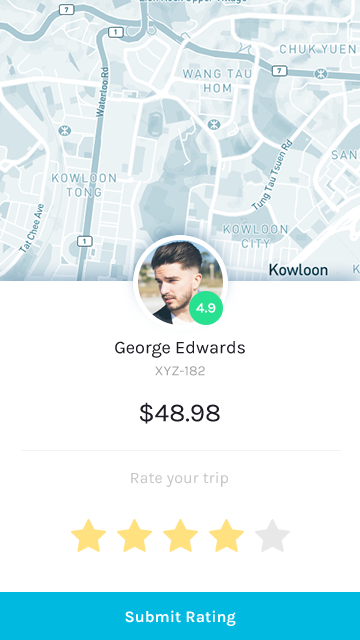
<style>
.page{position:relative;width:360px;height:640px;background:#ffffff}
.page>*{position:absolute;margin:0}
.t1{font:13.9px "Karla-Bold";color:#ffffff}
.t2{font:18px "Karla-Regular";color:#1b1b24}
.t3{font:14px "Karla-Regular";color:#a4a4a7;text-transform:uppercase}
.t4{font:26px "Karla-Regular";color:#1b1b24}
.t5{font:16px "Karla-Regular";color:#c6c6c8}
.t6{font:16px "Karla-Bold";color:#ffffff}
</style>
<div class="page">
<p class="t1" style="left:196px;top:303px;width:20px;height:10px">4.9</p>
<p class="t2" style="left:115px;top:341px;width:130px;height:17px">George Edwards</p>
<p class="t3" style="left:155px;top:366px;width:50px;height:10px">XYZ-182</p>
<p class="t4" style="left:140px;top:402px;width:80px;height:22px">$48.98</p>
<p class="t5" style="left:131px;top:472px;width:97px;height:15px">Rate your trip</p>
<p class="t6" style="left:125px;top:610px;width:111px;height:16px">Submit Rating</p>
</div>
